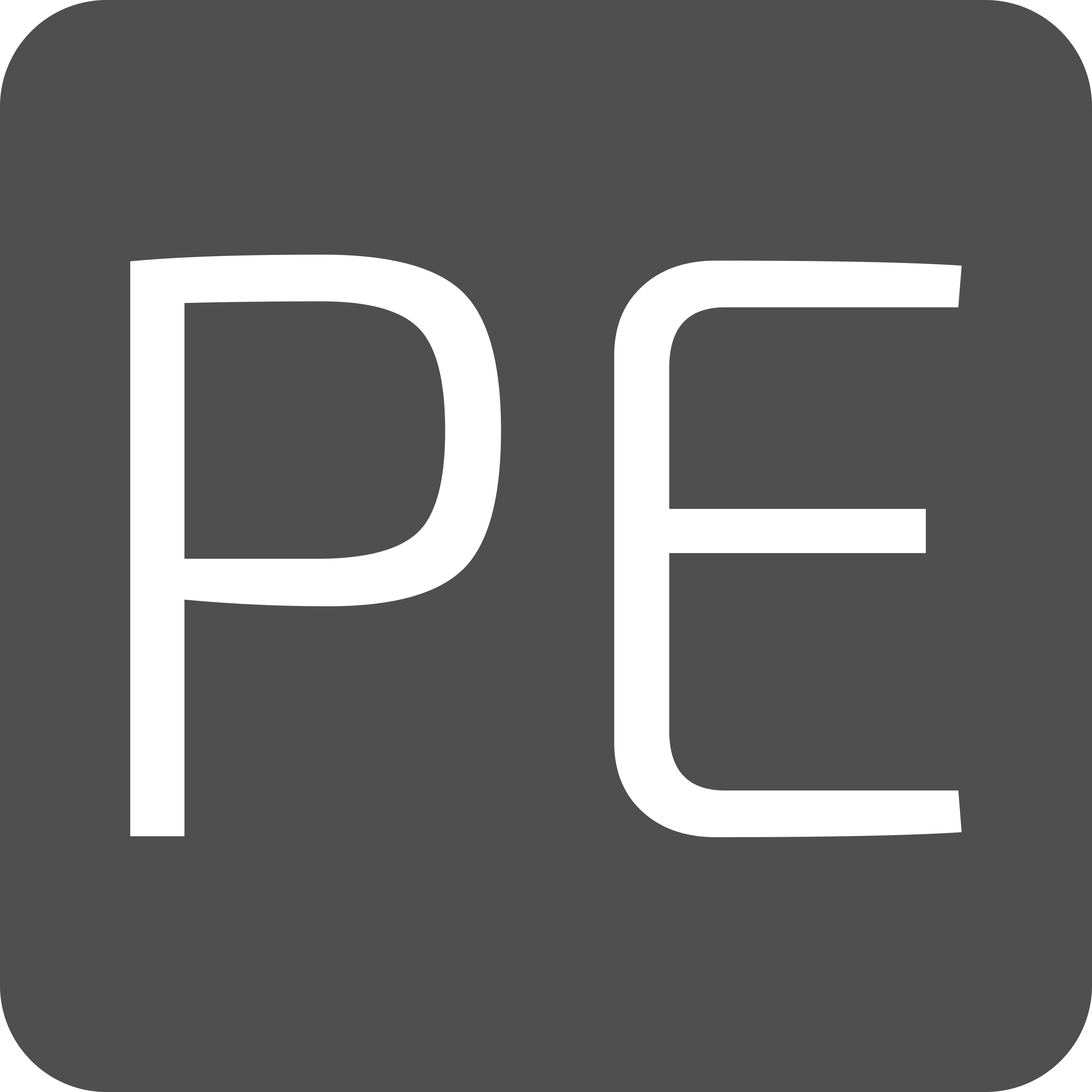
<style>
.page{position:relative;width:1092px;height:1092px;background:#4f4f4f}
.page>*{position:absolute;margin:0}
.t1{font:833.1px "Exo2-Light";color:#ffffff}
</style>
<div class="page">
<p class="t1" style="left:130px;top:255px;width:832px;height:582px">PE</p>
</div>
